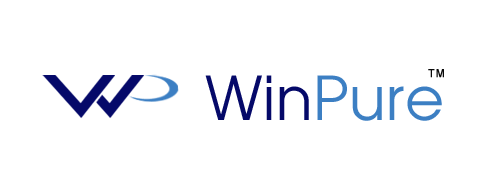
<style>
.page{position:relative;width:500px;height:192px;background:#ffffff}
.page>*{position:absolute;margin:0}
.t1{font:60px "QTAvanti";color:#3c7fc3}
.t2{font:60px "QTAvanti";color:#050969}
.t3{font:11px "ArialMT";letter-spacing:0.05em;color:#090909;font-weight:bold}
</style>
<div class="page">
<p class="t1" style="left:205px;top:75px;width:237px;height:46px"><span class="t2">Win</span>Pure</p>
<p class="t3" style="left:428px;top:69px;width:16px;height:9px">TM</p>
</div>
